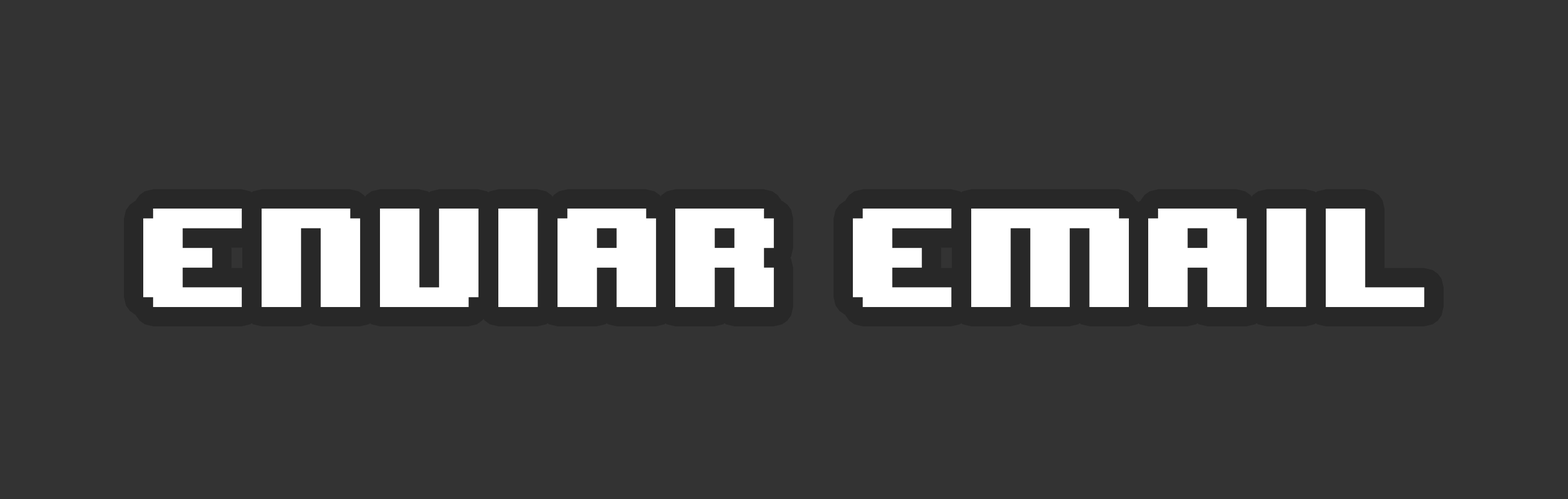
<style>
.page{position:relative;width:1568px;height:499px;background:#333333}
.page>*{position:absolute;margin:0}
.t1{font:118.2px "8BITWONDERNominal";color:#ffffff}
</style>
<div class="page">
<p class="t1" style="left:143px;top:209px;width:1282px;height:98px">enviar email</p>
</div>
